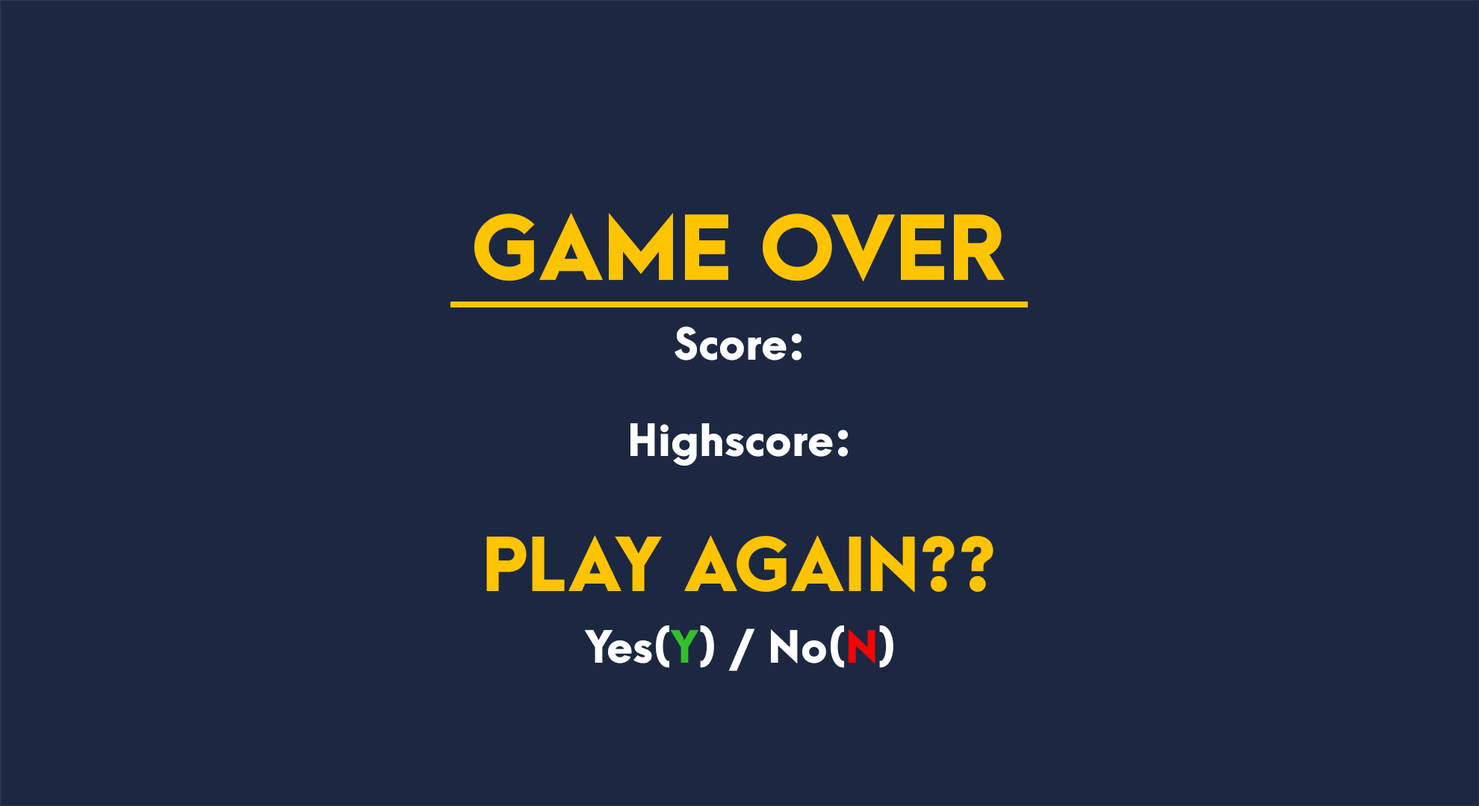
<style>
.page{position:relative;width:1479px;height:806px;background:#1c2841}
.page>*{position:absolute;margin:0}
.t1{font:80.6px "ArcaMajora3-Heavy";color:#ffc400;scale:1.03 1}
.t2{font:40.3px "ArcaMajora3-Heavy";color:#ffffff;scale:1.03 1}
.t3{font:67.2px "ArcaMajora3-Heavy";color:#ffc400;scale:1.03 1}
.t4{font:40.3px "ArcaMajora3-Heavy";color:#34be2d;scale:1.03 1}
.t5{font:40.3px "ArcaMajora3-Heavy";color:#ff0000;scale:1.03 1}
</style>
<div class="page">
<p class="t1" style="left:474px;top:213px;width:530px;height:69px">GAME OVER</p>
<p class="t2" style="left:630px;top:326px;width:218px;height:140px;text-align:center">Score:<br><br>Highscore:</p>
<p class="t3" style="left:486px;top:535px;width:507px;height:58px">PLAY AGAIN??</p>
<p class="t2" style="left:584px;top:626px;width:309px;height:45px">Yes(<span class="t4">Y</span>) / No(<span class="t5">N</span>)</p>
</div>
